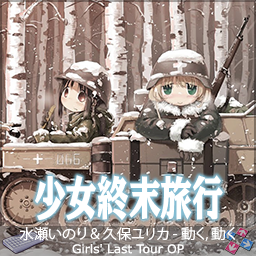
<style>
.page{position:relative;width:256px;height:256px}
.page>*{position:absolute;margin:0}
.t1{font:48px "PSP-NOW-MU-90pv-RKSJ-H";letter-spacing:-0.01em;color:#ffffff;scale:0.67 1}
.t2{font:14px "KozGoPr6N-Regular";letter-spacing:-0.01em;color:#ffffff}
.t3{font:12px "Verdana";letter-spacing:-0.005em;color:#ffffff}
</style>
<div class="page">
<p class="t1" style="left:35px;top:175px;width:188px;height:46px">少女終末旅行</p>
<p class="t2" style="left:19px;top:227px;width:217px;height:14px">水瀬いのり &amp; 久保ユリカ - 動く, 動く</p>
<p class="t3" style="left:72px;top:244px;width:112px;height:10px">Girls' Last Tour OP</p>
</div>
